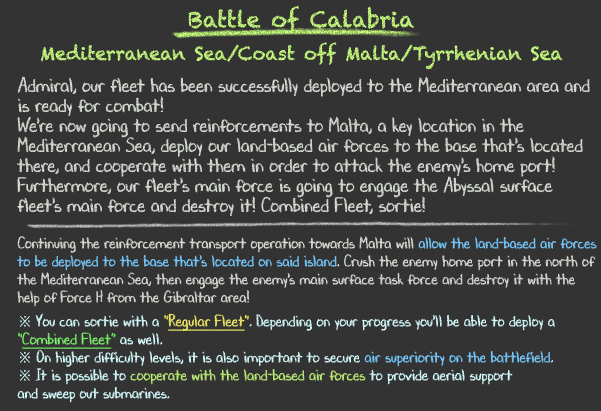
<style>
.page{position:relative;width:601px;height:411px;background:#333333}
.page>*{position:absolute;margin:0}
.t1{font:18px/36px "Chalkduster"}
.t2{font:22px/36px "Chalkduster"}
.t3{font:20px/20px "DJBChalkItUp";color:#d9ded6;scale:0.9 1}
.t4{font:16px/18px "DJBChalkItUp";color:#d9ded6;scale:0.9 1}
.t5{font:16px/18px "DJBChalkItUp";color:#78cbff;scale:0.9 1}
.t6{font:16px/24px "DJBChalkItUp";color:#d9ded6;scale:0.9 1}
.t7{font:16px/18px "TimesNewRomanPSMT";color:#d7feff;scale:0.9 1}
.t8{font:16px/18px "DJBChalkItUp";color:#d7feff;scale:0.9 1}
.t9{font:16px/18px "DJBChalkItUp";color:#f5ed68;scale:0.9 1}
.t10{font:16px/18px "DJBChalkItUp";color:#f5ed68;text-decoration:underline;scale:0.9 1}
.t11{font:16px/18px "DJBChalkItUp";color:#7bf26b;scale:0.9 1}
.t12{font:16px/18px "DJBChalkItUp";color:#7bf26b;text-decoration:underline;scale:0.9 1}
.t13{font:16px/18px "DJBChalkItUp";color:#bdef78;scale:0.9 1}
</style>
<div class="page">
<p class="t1" style="left:41px;top:6px;width:522px;height:64px;text-align:center"><span class="t2">Battle of Calabria<br></span>Mediterranean Sea/Coast off Malta/Tyrrhenian Sea</p>
<p class="t3" style="left:17px;top:76px;width:580px;height:327px">Admiral, our fleet has been successfully deployed to the Mediterranean area and<br>is ready for combat! <br>We're now going to send reinforcements to Malta, a key location in the<br>Mediterranean Sea, deploy our land-based air forces to the base that's located<br>there, and cooperate with them in order to attack the enemy's home port! <br>Furthermore, our fleet's main force is going to engage the Abyssal surface<br>fleet's main force and destroy it! Combined Fleet, sortie!<br><br><span class="t4">Continuing the reinforcement transport operation towards Malta will </span><span class="t5">allow the land-based air forces<br>to be deployed to the base that's located on said island</span><span class="t4">. Crush the enemy home port in the north of<br>the Mediterranean Sea, then engage the enemy's main surface task force and destroy it with the<br></span><span class="t6">help of Force H from the Gibraltar area!<br></span><span class="t7">※ </span><span class="t8">You can sortie with a </span><span class="t9">"</span><span class="t10">Regular Fleet</span><span class="t9">"</span><span class="t8">. Depending on your progress you'll be able to deploy a<br></span><span class="t11">"</span><span class="t12">Combined Fleet</span><span class="t11">"</span><span class="t8"> as well.<br></span><span class="t7">※</span><span class="t8"> On higher difficulty levels, it is also important to secure </span><span class="t5">air superiority on the battlefield</span><span class="t8">.<br></span><span class="t7">※ </span><span class="t8">It is possible to </span><span class="t13">cooperate with the land-based air forces </span><span class="t8">to provide aerial support<br>and sweep out submarines.</span></p>
</div>
